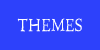
<style>
.page{position:relative;width:100px;height:50px;background:#2d41fb}
.page>*{position:absolute;margin:0}
.t1{font:18px "Immortal";letter-spacing:0.1em;color:#ffffff;scale:0.67 1}
</style>
<div class="page">
<p class="t1" style="left:17px;top:18px;width:65px;height:14px">THEMES</p>
</div>
